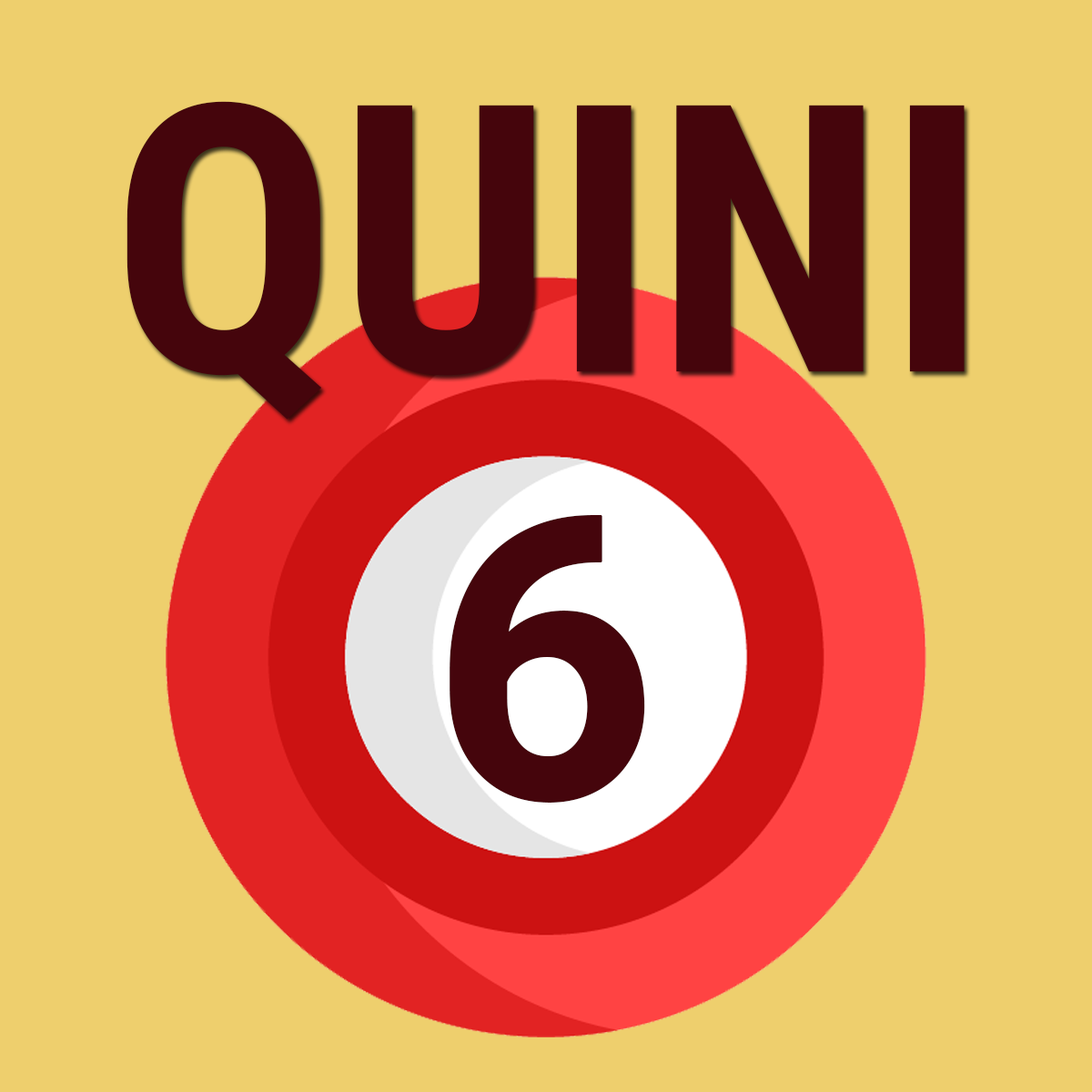
<style>
.page{position:relative;width:1092px;height:1092px;background:#eecf6d}
.page>*{position:absolute;margin:0}
.t1{font:374px "RobotoCondensed-Bold";letter-spacing:-0.025em;color:#45050c;font-weight:bold}
.t2{font:392.6px "Roboto-Bold";letter-spacing:-0.025em;color:#45050c;font-weight:bold}
</style>
<div class="page">
<p class="t1" style="left:126px;top:101px;width:839px;height:319px">QUINI</p>
<p class="t2" style="left:450px;top:515px;width:195px;height:288px">6</p>
</div>
